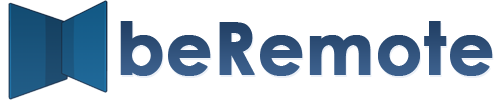
<style>
.page{position:relative;width:500px;height:100px;background:#ffffff}
.page>*{position:absolute;margin:0}
.t1{font:72px "CenturyGothic-Bold";color:#32537d;font-weight:bold}
</style>
<div class="page">
<p class="t1" style="left:120px;top:21px;width:373px;height:55px">beRemote</p>
</div>
